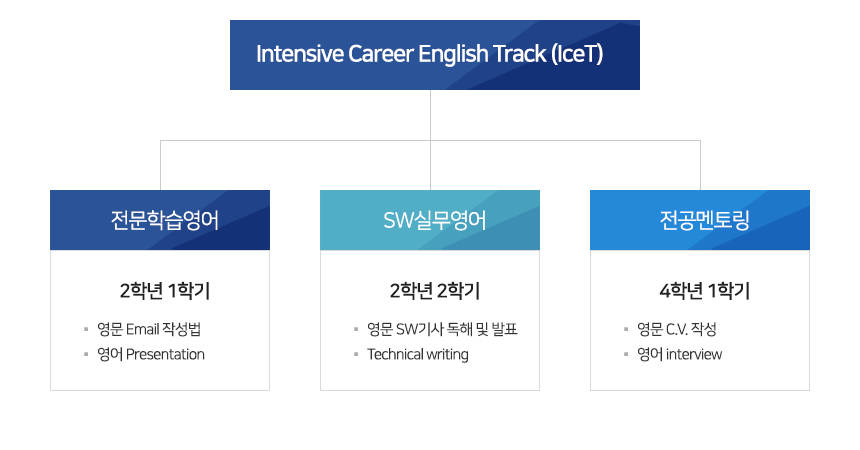
<style>
.page{position:relative;width:860px;height:450px;background:#ffffff}
.page>*{position:absolute;margin:0}
.t1{font:23px "NanumSquareB";letter-spacing:-0.05em;color:#ffffff}
.t2{font:21px "NanumSquareR";letter-spacing:-0.05em;color:#ffffff}
.t3{font:19px "NanumSquareB";letter-spacing:-0.05em;color:#212121}
.t4{font:34px/25px "NanumSquareR";letter-spacing:-0.05em;color:#acacac}
.t5{font:15px/25px "NanumSquareR";letter-spacing:-0.05em;color:#333333}
</style>
<div class="page">
<p class="t1" style="left:257px;top:43px;width:346px;height:24px">Intensive Career English Track (IceT)</p>
<p class="t2" style="left:111px;top:210px;width:107px;height:21px">전문학습영어</p>
<p class="t2" style="left:384px;top:210px;width:101px;height:21px">SW실무영어</p>
<p class="t2" style="left:660px;top:210px;width:89px;height:21px">전공멘토링</p>
<p class="t3" style="left:120px;top:281px;width:89px;height:19px">2학년 1학기</p>
<p class="t3" style="left:390px;top:281px;width:89px;height:19px">2학년 2학기</p>
<p class="t3" style="left:659px;top:281px;width:90px;height:19px">4학년 1학기</p>
<p class="t4" style="left:84px;top:327px;width:4px;height:29px">.<br>.</p>
<p class="t5" style="left:98px;top:322px;width:107px;height:40px">영문 Email 작성법<br>영어 Presentation</p>
<p class="t4" style="left:354px;top:327px;width:4px;height:29px">.<br>.</p>
<p class="t5" style="left:367px;top:322px;width:151px;height:41px">영문 SW기사 독해 및 발표<br>Technical writing</p>
<p class="t4" style="left:624px;top:327px;width:4px;height:29px">.<br>.</p>
<p class="t5" style="left:638px;top:322px;width:85px;height:40px">영문 C.V. 작성<br>영어 interview</p>
</div>
